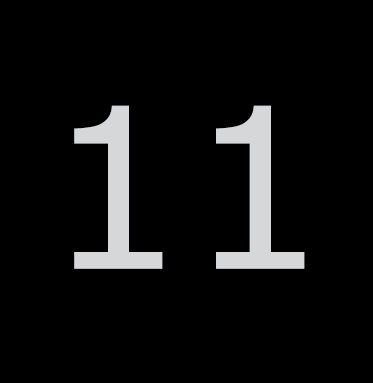
<style>
.page{position:relative;width:373px;height:383px;background:#000000}
.page>*{position:absolute;margin:0}
.t1{font:223.1px "Verdana";color:#d5d7d8}
</style>
<div class="page">
<p class="t1" style="left:74px;top:105px;width:231px;height:164px">11</p>
</div>
